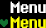
<style>
.page{position:relative;width:46px;height:28px;background:#000000}
.page>*{position:absolute;margin:0}
.t1{font:19.9px "8bitoperator-JVE";color:#ffffff}
.t2{font:19.9px "8bitoperator-JVE";color:#fcff00}
</style>
<div class="page">
<p class="t1" style="left:10px;top:1px;width:36px;height:12px">Menu</p>
<p class="t2" style="left:10px;top:16px;width:36px;height:12px">Menu</p>
</div>
